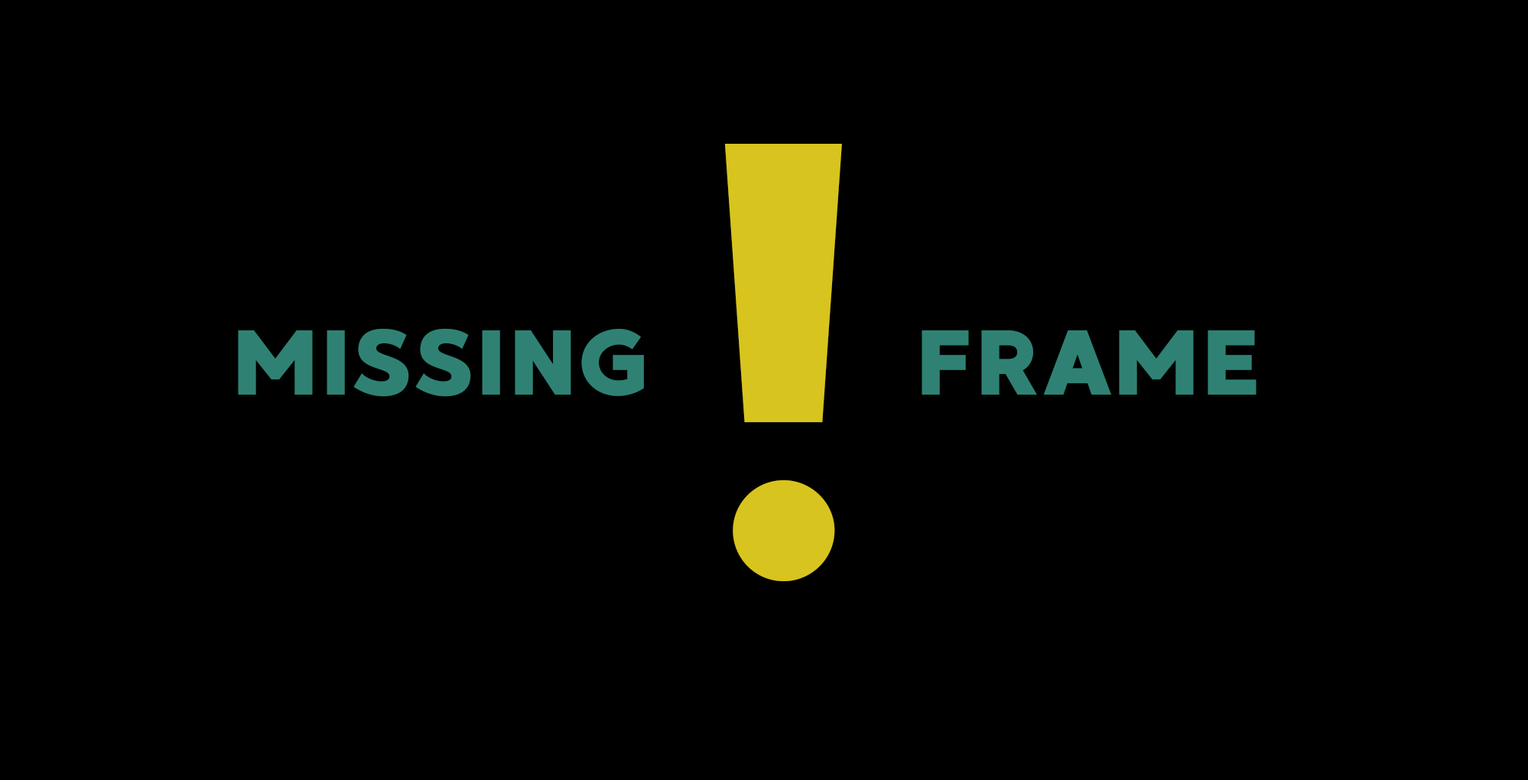
<style>
.page{position:relative;width:1528px;height:780px;background:#000000}
.page>*{position:absolute;margin:0}
.t1{font:611.9px "MADEGoodTimeGrotesk";color:#d8c41e}
.t2{font:91.8px "MADEGoodTimeGrotesk";color:#2f8273}
</style>
<div class="page">
<p class="t1" style="left:724px;top:144px;width:118px;height:437px">!</p>
<p class="t2" style="left:238px;top:328px;width:1019px;height:69px">MISSING        FRAME</p>
</div>
